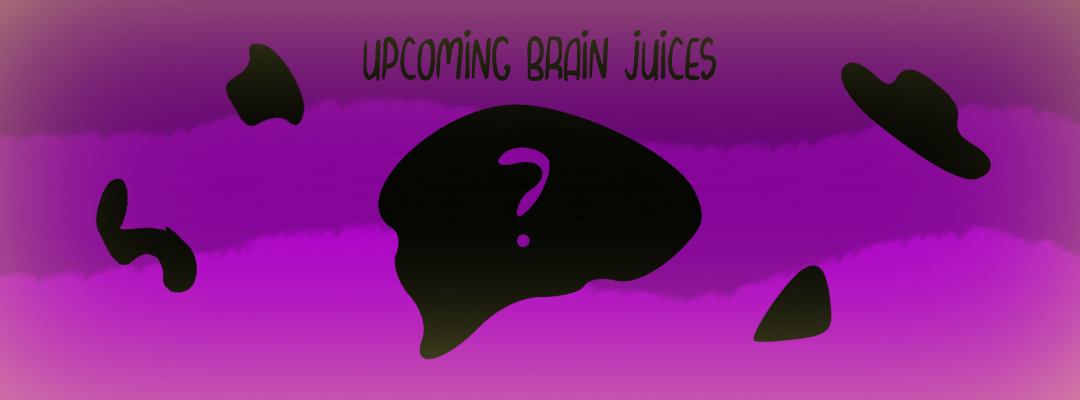
<style>
.page{position:relative;width:1080px;height:400px}
.page>*{position:absolute;margin:0}
.t1{font:50px "CurvyThins";color:#222210}
</style>
<div class="page">
<p class="t1" style="left:363px;top:30px;width:354px;height:53px">UPCOMING BRAIN JUICES</p>
</div>
